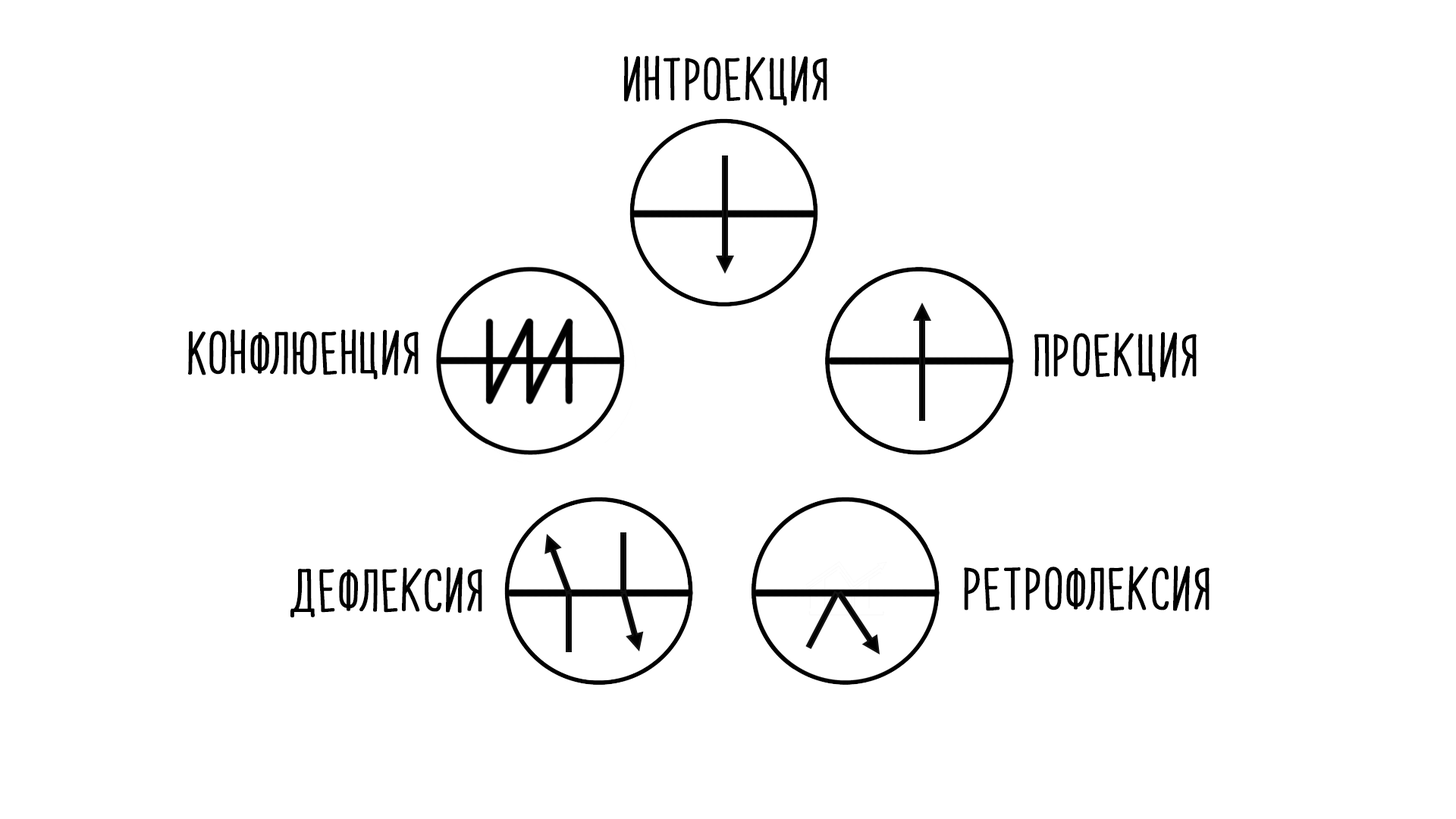
<style>
.page{position:relative;width:1456px;height:819px;background:#ffffff}
.page>*{position:absolute;margin:0}
.t1{font:36.4px "PapayaSunrise";color:#000000;font-weight:bold}
</style>
<div class="page">
<p class="t1" style="left:624px;top:55px;width:203px;height:51px">Интроекция</p>
<p class="t1" style="left:188px;top:329px;width:231px;height:51px">Конфлюенция</p>
<p class="t1" style="left:1034px;top:332px;width:163px;height:50px">Проекция</p>
<p class="t1" style="left:290px;top:567px;width:192px;height:51px">Дефлексия</p>
<p class="t1" style="left:964px;top:566px;width:246px;height:45px">Ретрофлексия</p>
</div>
